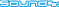
<style>
.page{position:relative;width:59px;height:7px}
.page>*{position:absolute;margin:0}
.t1{font:10px "ThundergodII";color:#fefefe}
</style>
<div class="page">
<p class="t1" style="left:0px;top:0px;width:59px;height:7px">Sounds:</p>
</div>
